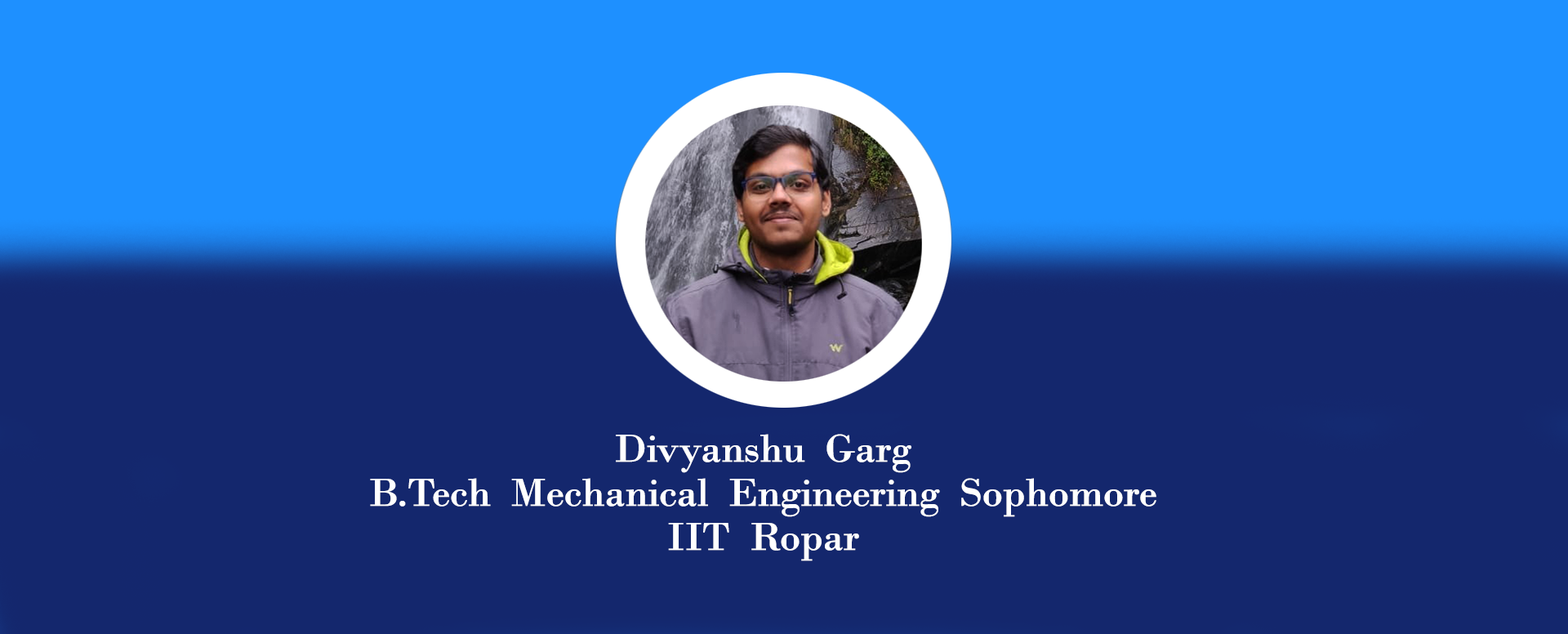
<style>
.page{position:relative;width:1568px;height:634px;background:#14276d}
.page>*{position:absolute;margin:0}
.t1{font:40.8px/14.7px "BodoniMT";letter-spacing:-0.04em;color:#ffffff;font-weight:bold;scale:1.05 1}
</style>
<div class="page">
<p class="t1" style="left:370px;top:434px;width:786px;height:127px;text-align:center">Divyanshu  Garg<br><br><br>B.Tech  Mechanical  Engineering  Sophomore<br><br><br>IIT  Ropar</p>
</div>
